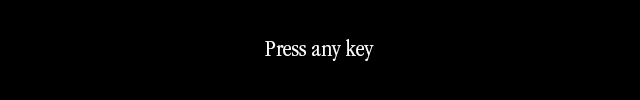
<style>
.page{position:relative;width:640px;height:100px;background:#000000}
.page>*{position:absolute;margin:0}
.t1{font:24px "ITCGaramondStd-LtNarrow";color:#ffffff}
</style>
<div class="page">
<p class="t1" style="left:265px;top:39px;width:109px;height:22px">Press any key</p>
</div>
